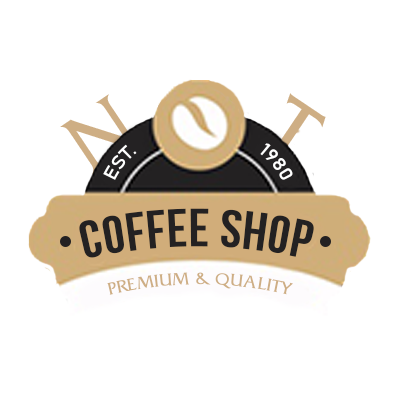
<style>
.page{position:relative;width:400px;height:400px;background:#ffffff}
.page>*{position:absolute;margin:0}
.t1{font:87.3px "FrizQuadrataStd";letter-spacing:0.02em;color:#ceae84}
.t2{font:18px "Bahnschrift";letter-spacing:0.02em;color:#ffffff}
.t3{font:53px "BebasNeue";letter-spacing:0.02em;color:#232122}
.t4{font:18px "FrizQuadrataStd";letter-spacing:0.02em;color:#ceae84}
</style>
<div class="page">
<p class="t1" style="left:60px;top:94px;width:79px;height:81px;rotate:-34deg">N</p>
<p class="t1" style="left:269px;top:93px;width:57px;height:66px;rotate:-146deg">T</p>
<p class="t2" style="left:103px;top:144px;width:34px;height:36px;rotate:-52deg">EST.</p>
<p class="t2" style="left:260px;top:143px;width:33px;height:37px;rotate:51deg">1980</p>
<p class="t3" style="left:79px;top:208px;width:235px;height:50px">COFFEE SHOP</p>
<p class="t4" style="left:107px;top:272px;width:186px;height:23px">PREMIUM &amp; QUALITY</p>
</div>
